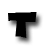
<style>
.page{position:relative;width:48px;height:48px;background:#ffffff}
.page>*{position:absolute;margin:0}
.t1{font:40px "TeenageDelinquent";color:#000000}
</style>
<div class="page">
<p class="t1" style="left:8px;top:12px;width:29px;height:26px">T</p>
</div>
